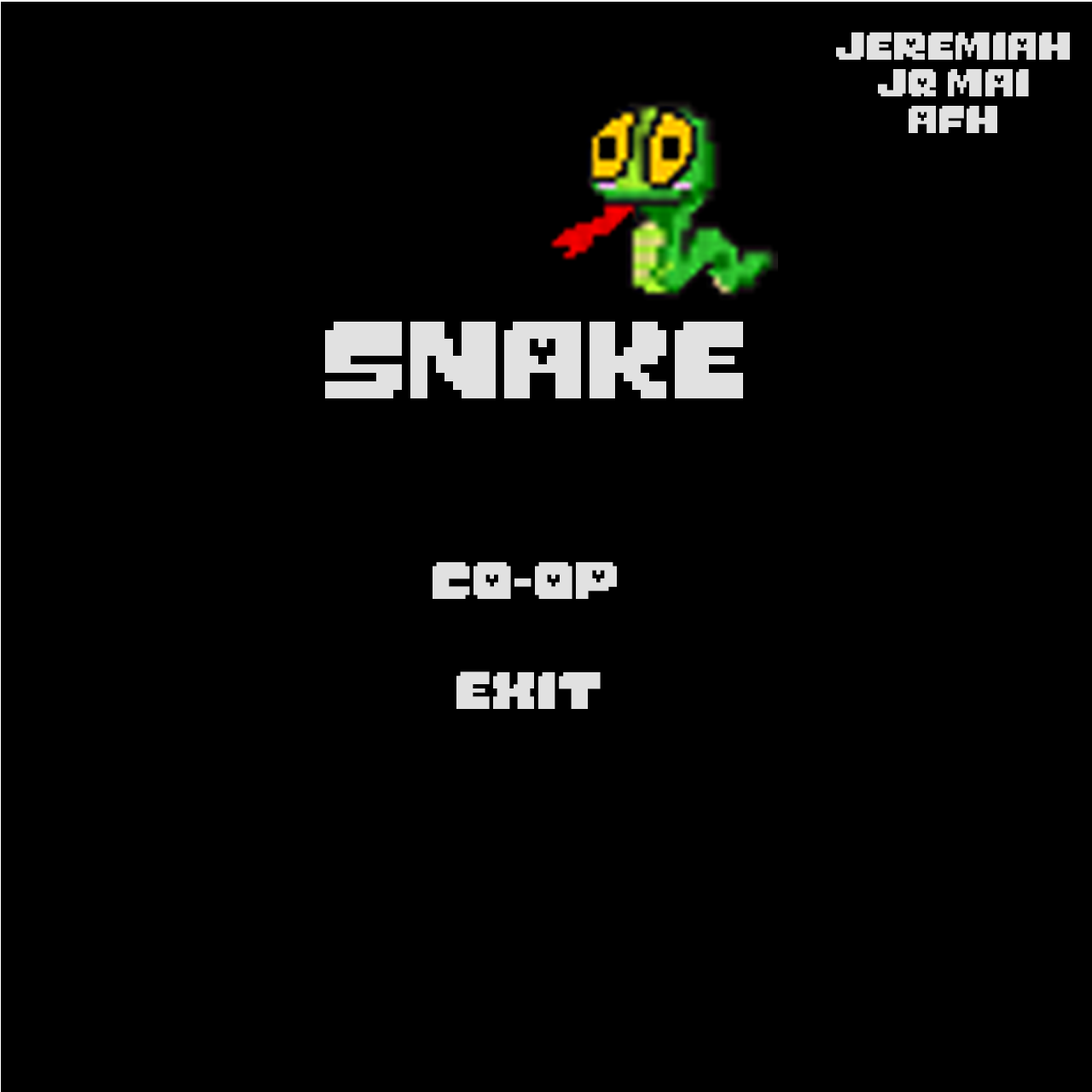
<style>
.page{position:relative;width:1092px;height:1092px;background:#000000}
.page>*{position:absolute;margin:0}
.t1{font:30.7px "MonsterFriendFore";color:#e1e1e1}
.t2{font:85.3px "MonsterFriendFore";color:#e1e1e1}
.t3{font:40.9px "MonsterFriendFore";color:#e1e1e1}
</style>
<div class="page">
<p class="t1" style="left:836px;top:32px;width:234px;height:101px;text-align:center">JEREMIAH<br>JQ MAi<br>AFH</p>
<p class="t2" style="left:325px;top:322px;width:418px;height:76px">SNAKE</p>
<p class="t3" style="left:433px;top:562px;width:184px;height:37px">CO-OP</p>
<p class="t3" style="left:456px;top:671px;width:145px;height:38px">EXIT</p>
</div>
